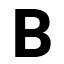
<style>
.page{position:relative;width:64px;height:64px;background:#ffffff}
.page>*{position:absolute;margin:0}
.t1{font:66.7px "Roboto-Bold";color:#000000}
</style>
<div class="page">
<p class="t1" style="left:15px;top:9px;width:36px;height:48px">B</p>
</div>
